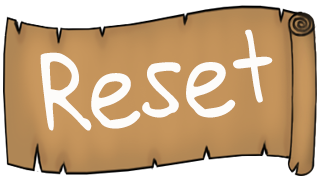
<style>
.page{position:relative;width:320px;height:180px}
.page>*{position:absolute;margin:0}
.t1{font:133.3px "onthemove";color:#fdfcfa}
</style>
<div class="page">
<p class="t1" style="left:40px;top:29px;width:233px;height:102px;rotate:-7deg">Reset</p>
</div>
